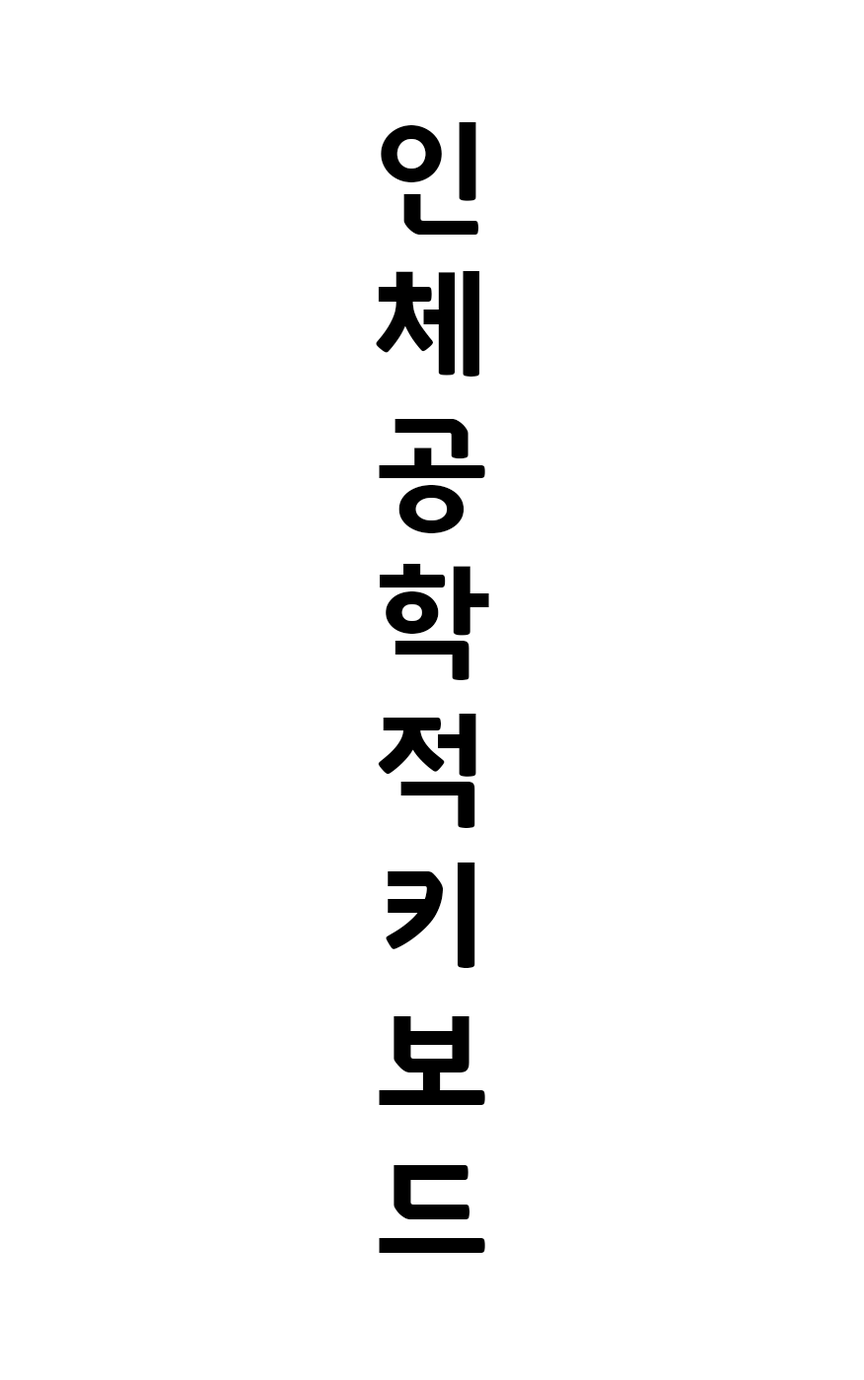
<style>
.page{position:relative;width:864px;height:1380px;background:#ffffff}
.page>*{position:absolute;margin:0}
.t1{font:123.3px "GodoB";letter-spacing:0.7em;color:#000000}
</style>
<div class="page">
<p class="t1" style="left:376px;top:122px;width:113px;height:1131px;text-align:center">인<br>체<br>공<br>학<br>적<br>키<br>보<br>드</p>
</div>
